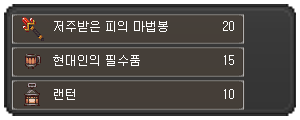
<style>
.page{position:relative;width:300px;height:120px}
.page>*{position:absolute;margin:0}
.t1{font:12px "Gulim";color:#ffffff}
</style>
<div class="page">
<p class="t1" style="left:54px;top:21px;width:114px;height:11px">저주받은 피의 마법봉</p>
<p class="t1" style="left:223px;top:21px;width:11px;height:10px">20</p>
<p class="t1" style="left:53px;top:55px;width:87px;height:11px">현대인의 필수품</p>
<p class="t1" style="left:224px;top:55px;width:10px;height:10px">15</p>
<p class="t1" style="left:54px;top:89px;width:21px;height:11px">랜턴</p>
<p class="t1" style="left:224px;top:89px;width:10px;height:10px">10</p>
</div>
